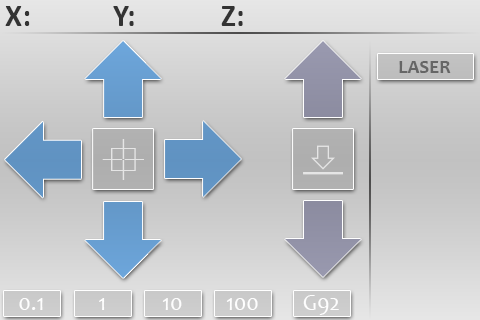
<style>
.page{position:relative;width:480px;height:320px}
.page>*{position:absolute;margin:0}
.t1{font:31.5px "Calibri-Bold";color:#333333}
.t2{font:18.9px "Candara-Bold";color:#666666}
.t3{font:22.7px "Candara";color:#fefefe}
</style>
<div class="page">
<p class="t1" style="left:5px;top:6px;width:238px;height:20px">X:   Y:    Z:</p>
<p class="t2" style="left:399px;top:61px;width:52px;height:12px">LASER</p>
<p class="t3" style="left:19px;top:298px;width:24px;height:12px">0.1</p>
<p class="t3" style="left:99px;top:298px;width:6px;height:12px">1</p>
<p class="t3" style="left:162px;top:298px;width:20px;height:12px">10</p>
<p class="t3" style="left:226px;top:298px;width:32px;height:12px">100</p>
<p class="t3" style="left:303px;top:295px;width:36px;height:20px">G92</p>
</div>
